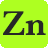
<style>
.page{position:relative;width:48px;height:48px;background:#aeff21}
.page>*{position:absolute;margin:0}
.t1{font:36px "Baskerville-SemiBold";color:#272727}
</style>
<div class="page">
<p class="t1" style="left:3px;top:11px;width:43px;height:24px">Zn</p>
</div>
